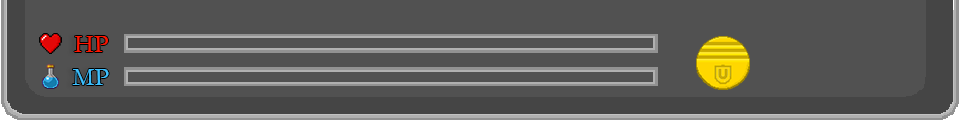
<style>
.page{position:relative;width:960px;height:120px;background:#515151}
.page>*{position:absolute;margin:0}
.t1{font:26.4px "Garamond";color:#ff1500}
.t2{font:26.4px "Garamond";color:#3dc0ff}
</style>
<div class="page">
<p class="t1" style="left:74px;top:36px;width:34px;height:16px">HP</p>
<p class="t2" style="left:72px;top:69px;width:37px;height:16px">MP</p>
</div>
